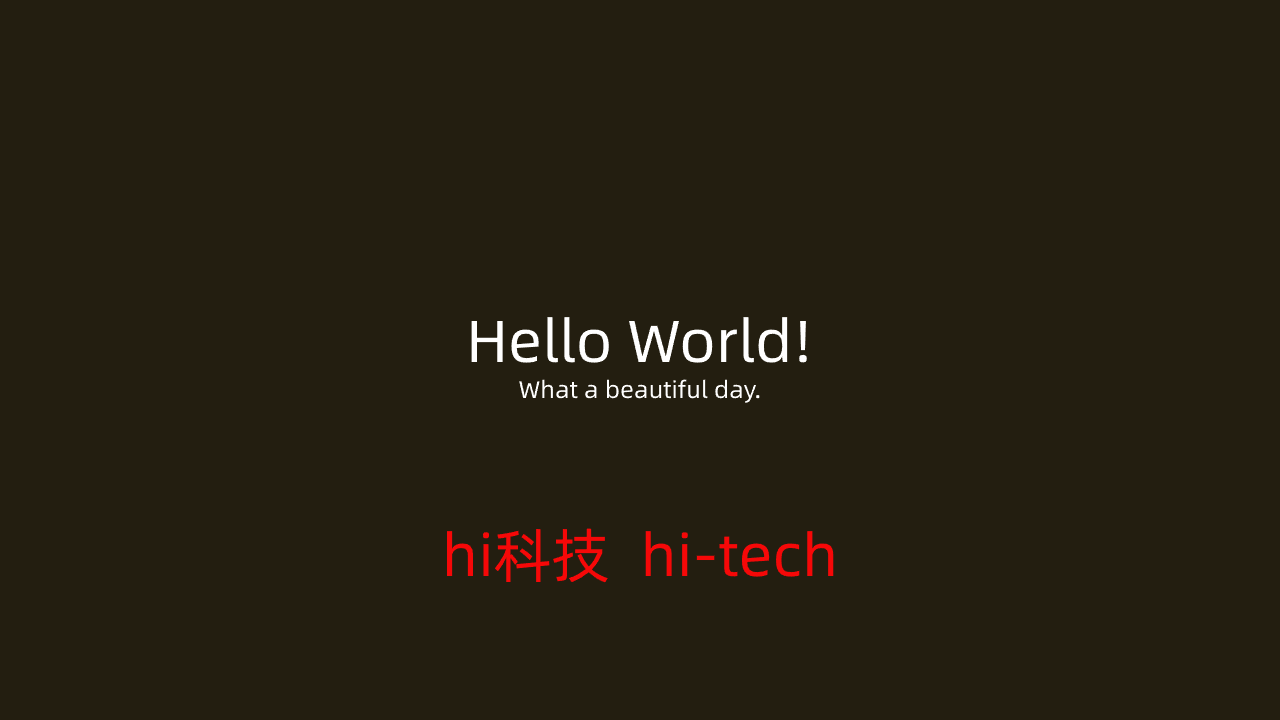
<style>
.page{position:relative;width:1280px;height:720px;background:#231e10}
.page>*{position:absolute;margin:0}
.t1{font:59px "AlibabaPuHuiTi-Regular";color:#ffffff}
.t2{font:24px "AlibabaPuHuiTi-Regular";color:#ffffff}
.t3{font:59px "AlibabaPuHuiTi-Regular";color:#f60808}
</style>
<div class="page">
<p class="t1" style="left:471px;top:317px;width:336px;height:46px">Hello World!</p>
<p class="t2" style="left:519px;top:379px;width:241px;height:24px">What a beautiful day.</p>
<p class="t3" style="left:447px;top:528px;width:387px;height:55px">hi科技  hi-tech</p>
</div>
